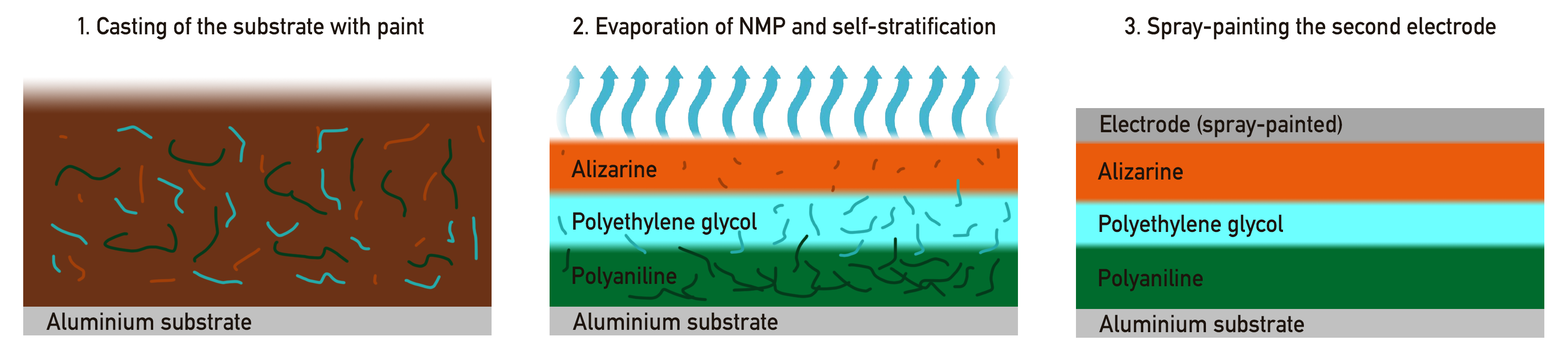
<style>
.page{position:relative;width:1568px;height:360px;background:#ffffff}
.page>*{position:absolute;margin:0}
.t1{font:24.4px "DIN-1451-Mittelschrift-Regular";color:#1d140d;scale:0.95 1}
</style>
<div class="page">
<p class="t1" style="left:78px;top:17px;width:346px;height:22px">1. Casting of the substrate with paint</p>
<p class="t1" style="left:573px;top:17px;width:422px;height:22px">2. Evaporation of NMP and self-stratification</p>
<p class="t1" style="left:1125px;top:17px;width:371px;height:22px">3. Spray-painting the second electrode</p>
<p class="t1" style="left:1101px;top:115px;width:241px;height:22px">Electrode (spray-painted)</p>
<p class="t1" style="left:571px;top:160px;width:85px;height:18px">Alizarine</p>
<p class="t1" style="left:1098px;top:162px;width:85px;height:18px">Alizarine</p>
<p class="t1" style="left:573px;top:212px;width:184px;height:23px">Polyethylene glycol</p>
<p class="t1" style="left:1099px;top:214px;width:184px;height:23px">Polyethylene glycol</p>
<p class="t1" style="left:572px;top:266px;width:104px;height:23px">Polyaniline</p>
<p class="t1" style="left:1099px;top:269px;width:104px;height:23px">Polyaniline</p>
<p class="t1" style="left:46px;top:312px;width:205px;height:18px">Aluminium substrate</p>
<p class="t1" style="left:573px;top:312px;width:205px;height:18px">Aluminium substrate</p>
<p class="t1" style="left:1099px;top:315px;width:205px;height:18px">Aluminium substrate</p>
</div>
